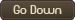
<style>
.page{position:relative;width:75px;height:20px}
.page>*{position:absolute;margin:0}
.t1{font:12px "PlanetEstyle";color:#e5dcb9}
</style>
<div class="page">
<p class="t1" style="left:13px;top:5px;width:49px;height:9px">Go Down</p>
</div>
